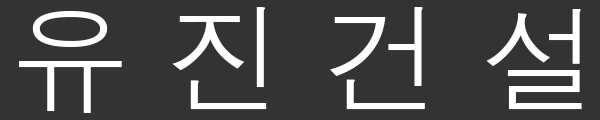
<style>
.page{position:relative;width:600px;height:120px;background:#333333}
.page>*{position:absolute;margin:0}
.t1{font:121.2px "Dotum";letter-spacing:0.3em;color:#ffffff}
</style>
<div class="page">
<p class="t1" style="left:19px;top:7px;width:563px;height:106px">유진건설</p>
</div>
